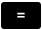
<style>
.page{position:relative;width:42px;height:30px;background:#000000}
.page>*{position:absolute;margin:0}
.t1{font:15px "SourceSansPro-Regular";color:#fefefe;text-transform:uppercase;font-weight:bold}
</style>
<div class="page">
<p class="t1" style="left:17px;top:12px;width:8px;height:6px">=</p>
</div>
